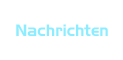
<style>
.page{position:relative;width:123px;height:60px;background:#ffffff}
.page>*{position:absolute;margin:0}
.t1{font:16px "AeroRegularSWFTE";color:#8bedff}
</style>
<div class="page">
<p class="t1" style="left:16px;top:24px;width:92px;height:12px">Nachrichten</p>
</div>
